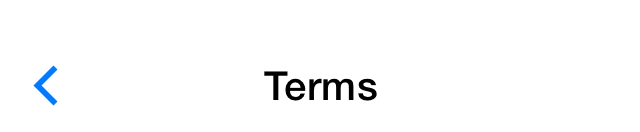
<style>
.page{position:relative;width:640px;height:132px;background:#ffffff}
.page>*{position:absolute;margin:0}
.t1{font:40px "HelveticaNeue-Medium";letter-spacing:0.015em;color:#000000}
</style>
<div class="page">
<p class="t1" style="left:264px;top:71px;width:113px;height:30px">Terms</p>
</div>
